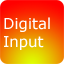
<style>
.page{position:relative;width:64px;height:64px}
.page>*{position:absolute;margin:0}
.t1{font:14.9px "Verdana";color:#ffffff}
</style>
<div class="page">
<p class="t1" style="left:4px;top:17px;width:46px;height:33px">Digital<br>Input</p>
</div>
